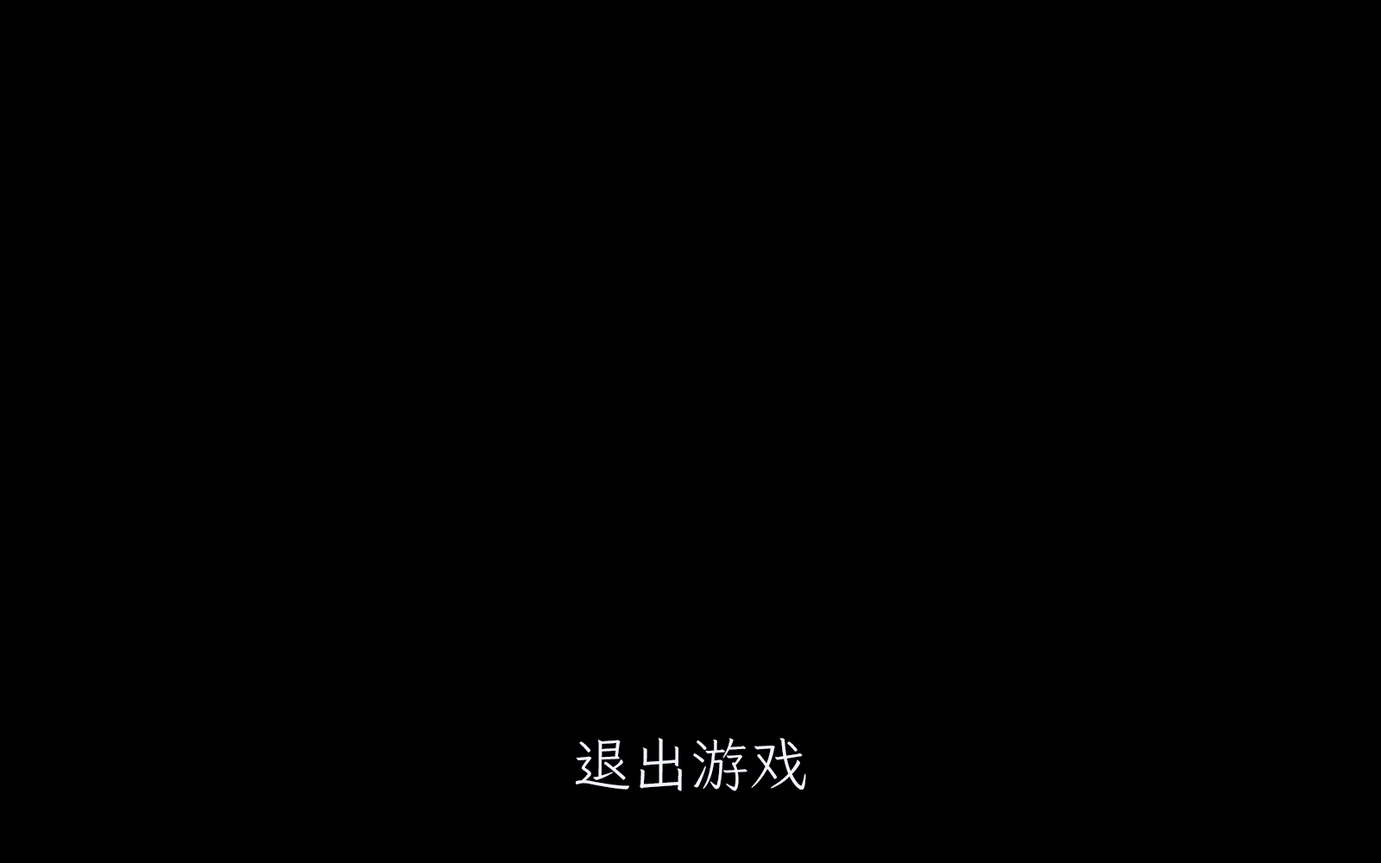
<style>
.page{position:relative;width:1381px;height:863px;background:#000000}
.page>*{position:absolute;margin:0}
.t1{font:58.7px "LXGWWenKaiLite-Light";color:#f2f4ff}
</style>
<div class="page">
<p class="t1" style="left:576px;top:738px;width:230px;height:54px">退出游戏</p>
</div>
